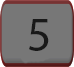
<style>
.page{position:relative;width:74px;height:67px;background:#777777}
.page>*{position:absolute;margin:0}
.t1{font:48px "MyriadPro-Regular";color:#191919}
</style>
<div class="page">
<p class="t1" style="left:29px;top:19px;width:20px;height:32px">5</p>
</div>
